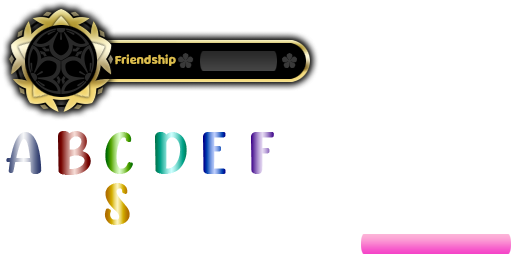
<style>
.page{position:relative;width:512px;height:256px;background:#ffffff}
.page>*{position:absolute;margin:0}
.t1{font:12px "MilkyNiceClean";color:#dcbd4e}
.t2{font:60px "CHICKENPie"}
</style>
<div class="page">
<p class="t1" style="left:115px;top:54px;width:61px;height:12px">Friendship</p>
<p class="t2" style="left:6px;top:132px;width:36px;height:42px">A</p>
<p class="t2" style="left:58px;top:131px;width:33px;height:44px">B</p>
<p class="t2" style="left:105px;top:132px;width:28px;height:42px">C</p>
<p class="t2" style="left:155px;top:132px;width:32px;height:42px">D</p>
<p class="t2" style="left:203px;top:132px;width:23px;height:42px">E</p>
<p class="t2" style="left:251px;top:132px;width:23px;height:42px">F</p>
<p class="t2" style="left:104px;top:183px;width:26px;height:42px">s</p>
</div>
